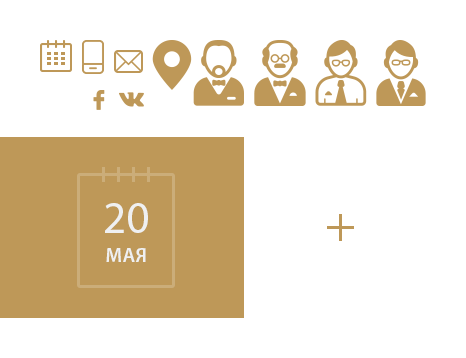
<style>
.page{position:relative;width:466px;height:358px;background:#ffffff}
.page>*{position:absolute;margin:0}
.t1{font:45px "MyriadPro-Regular";color:#eff0f1;text-transform:uppercase}
.t2{font:20px "MyriadPro-Semibold";color:#eff0f1;text-transform:uppercase}
</style>
<div class="page">
<p class="t1" style="left:105px;top:203px;width:43px;height:30px">20</p>
<p class="t2" style="left:106px;top:248px;width:40px;height:14px">мая</p>
</div>
